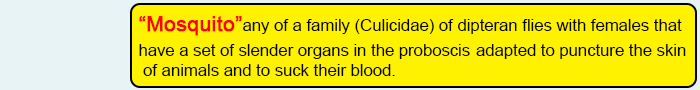
<style>
.page{position:relative;width:700px;height:90px;background:#fff200}
.page>*{position:absolute;margin:0}
.t1{font:16.7px "ArialMT";color:#020202}
.t2{font:20.8px "ArialMT";color:#fd010d;font-weight:bold}
</style>
<div class="page">
<p class="t1" style="left:139px;top:16px;width:547px;height:60px"><span class="t2">“Mosquito”</span>any of a family (Culicidae) of dipteran flies with females that <br>have a set of slender organs in the proboscis adapted to puncture the skin<br> of animals and to suck their blood.</p>
</div>
